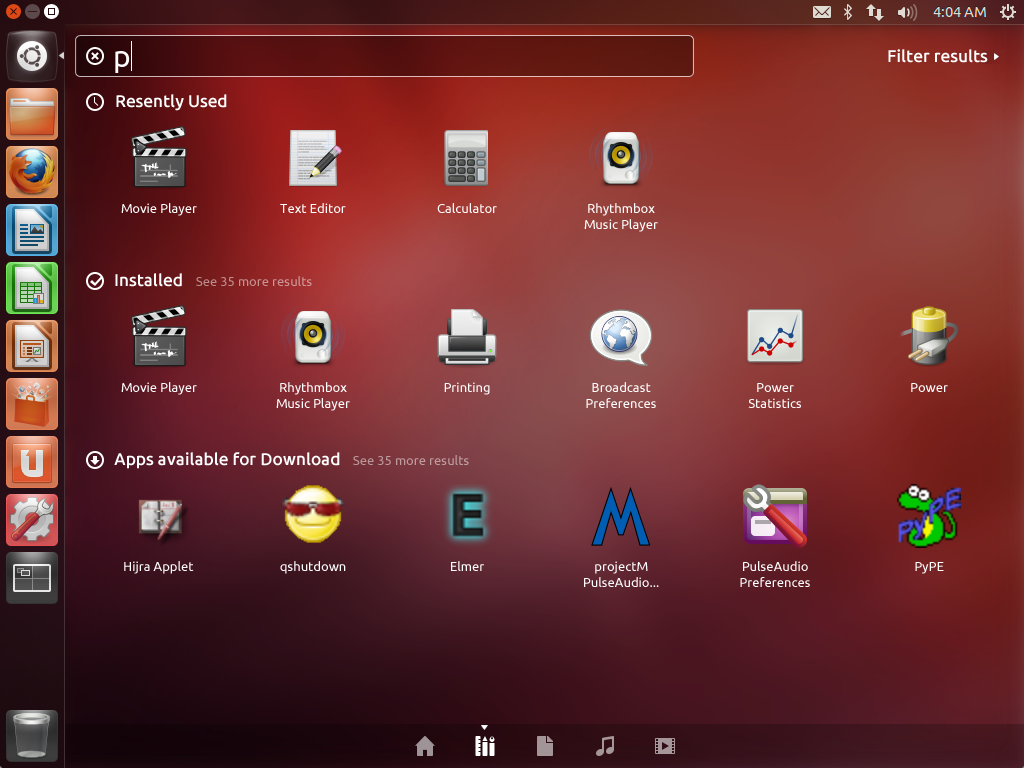
<style>
.page{position:relative;width:1024px;height:768px}
.page>*{position:absolute;margin:0}
.t1{font:17px "Ubuntu-Medium";color:#ffffff}
.t2{font:13px "Ubuntu";color:#ffffff}
.t3{font:13px/16px "Ubuntu";color:#ffffff}
.t4{font:13px "Ubuntu";color:#c49091}
.t5{font:13px "Ubuntu";color:#be9b9f}
</style>
<div class="page">
<p class="t1" style="left:888px;top:49px;width:100px;height:14px">Filter results</p>
<p class="t1" style="left:116px;top:94px;width:111px;height:17px">Resently Used</p>
<p class="t2" style="left:121px;top:203px;width:76px;height:13px">Movie Player</p>
<p class="t2" style="left:280px;top:203px;width:66px;height:10px">Text Editor</p>
<p class="t2" style="left:437px;top:203px;width:60px;height:10px">Calculator</p>
<p class="t3" style="left:584px;top:203px;width:74px;height:29px;text-align:center">Rhythmbox<br>Music Player</p>
<p class="t1" style="left:115px;top:273px;width:67px;height:14px">Installed</p>
<p class="t4" style="left:196px;top:276px;width:116px;height:10px">See 35 more results</p>
<p class="t2" style="left:121px;top:382px;width:76px;height:13px">Movie Player</p>
<p class="t3" style="left:276px;top:382px;width:74px;height:29px;text-align:center">Rhythmbox<br>Music Player</p>
<p class="t2" style="left:444px;top:382px;width:46px;height:13px">Printing</p>
<p class="t3" style="left:586px;top:382px;width:70px;height:26px;text-align:center">Broadcast<br>Preferences</p>
<p class="t3" style="left:748px;top:383px;width:53px;height:25px;text-align:center">Power<br>Statistics</p>
<p class="t2" style="left:911px;top:383px;width:37px;height:9px">Power</p>
<p class="t1" style="left:114px;top:452px;width:226px;height:17px">Apps available for Download</p>
<p class="t5" style="left:353px;top:455px;width:116px;height:10px">See 35 more results</p>
<p class="t2" style="left:124px;top:561px;width:70px;height:13px">Hijra Applet</p>
<p class="t2" style="left:280px;top:561px;width:66px;height:13px">qshutdown</p>
<p class="t2" style="left:451px;top:561px;width:33px;height:10px">Elmer</p>
<p class="t3" style="left:584px;top:561px;width:75px;height:26px;text-align:center">projectM<br>PulseAudio...</p>
<p class="t3" style="left:740px;top:561px;width:70px;height:26px;text-align:center">PulseAudio<br>Preferences</p>
<p class="t2" style="left:915px;top:562px;width:29px;height:12px">PyPE</p>
</div>
